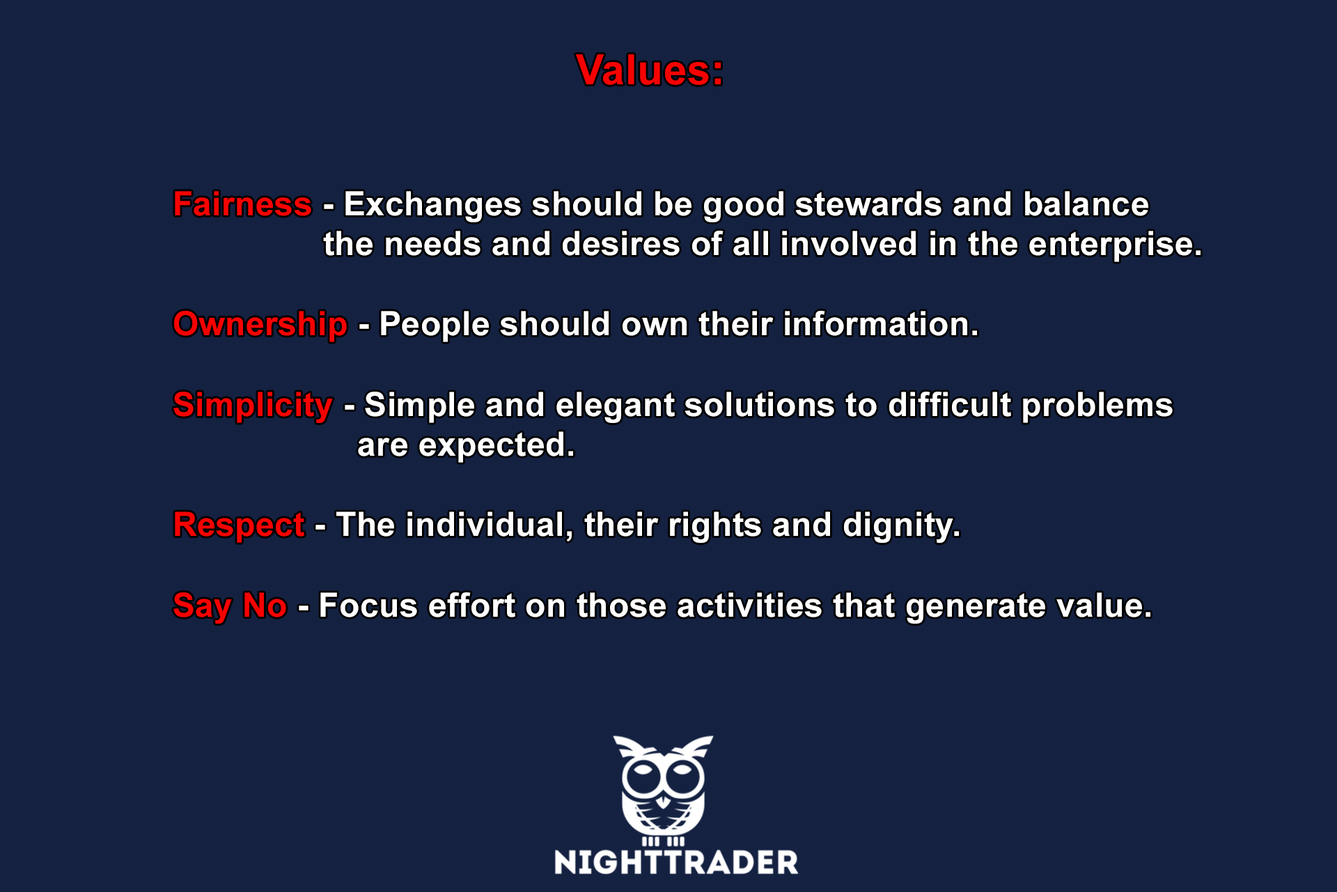
<style>
.page{position:relative;width:1337px;height:892px;background:#142141}
.page>*{position:absolute;margin:0}
.t1{font:33.4px "Arial-BoldMT";letter-spacing:0.01em;color:#ffffff}
.t2{font:41.8px "Arial-BoldMT";letter-spacing:0.01em;color:#f70202}
.t3{font:33.4px "Arial-BoldMT";letter-spacing:0.01em;color:#f70202}
</style>
<div class="page">
<p class="t1" style="left:173px;top:54px;width:1028px;height:569px;text-align:center"><span class="t2">Values:<br><br><br>   </span><span class="t3">Fairness</span> - Exchanges should be good stewards and balance             the needs and desires of all involved in the enterprise. <br><br>   <span class="t3">Ownership</span> - People should own their information.<br><br>   <span class="t3">Simplicity </span>- Simple and elegant solutions to difficult problems <br>           are expected.<br><br>   <span class="t3">Respect</span> - The individual, their rights and dignity. <br><br>   <span class="t3">Say No</span> - Focus effort on those activities that generate value.</p>
</div>
